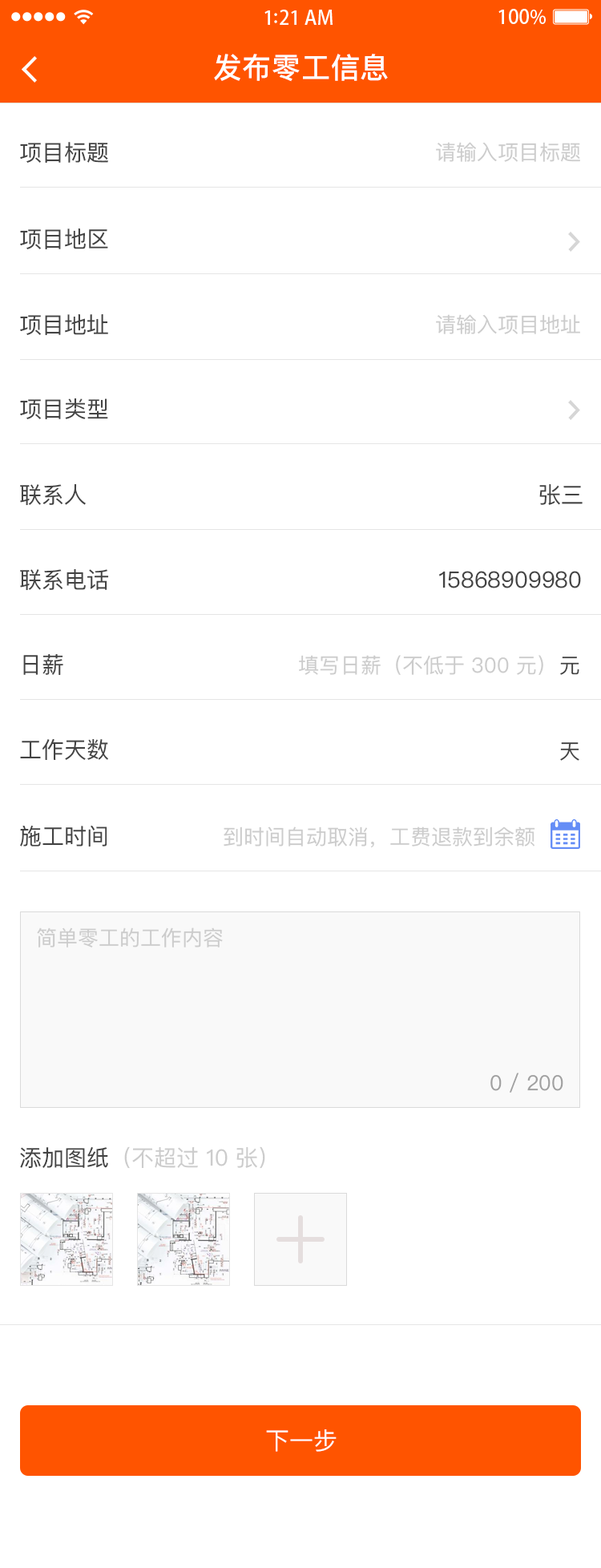
<style>
.page{position:relative;width:601px;height:1568px;background:#ffffff}
.page>*{position:absolute;margin:0}
.t1{font:28.9px "PingFangSC-Medium";letter-spacing:0.02em;color:#ffffff}
.t2{font:22.4px "PingFangSC-Regular";color:#434343}
.t3{font:20.8px "PingFangSC-Regular";color:#cccccc}
.t4{font:20.8px "PingFangSC-Regular";color:#434343}
.t5{font:20.8px "PingFangSC-Regular";color:#a0a0a0}
.t6{font:22.4px "PingFangSC-Regular";color:#cccccc}
.t7{font:24px "PingFangSC-Regular";color:#ffffff;text-transform:uppercase}
</style>
<div class="page">
<p class="t1" style="left:214px;top:54px;width:174px;height:28px">发布零工信息</p>
<p class="t2" style="left:20px;top:142px;width:88px;height:21px">项目标题</p>
<p class="t3" style="left:436px;top:142px;width:144px;height:20px">请输入项目标题</p>
<p class="t2" style="left:20px;top:228px;width:88px;height:21px">项目地区</p>
<p class="t2" style="left:20px;top:314px;width:88px;height:21px">项目地址</p>
<p class="t3" style="left:436px;top:314px;width:144px;height:20px">请输入项目地址</p>
<p class="t2" style="left:20px;top:398px;width:88px;height:21px">项目类型</p>
<p class="t2" style="left:20px;top:484px;width:66px;height:22px">联系人</p>
<p class="t2" style="left:540px;top:484px;width:43px;height:21px">张三</p>
<p class="t2" style="left:20px;top:569px;width:89px;height:22px">联系电话</p>
<p class="t2" style="left:439px;top:571px;width:142px;height:17px">15868909980</p>
<p class="t2" style="left:23px;top:654px;width:40px;height:21px">日薪</p>
<p class="t3" style="left:299px;top:655px;width:245px;height:20px">填写日薪（不低于 300 元）</p>
<p class="t4" style="left:560px;top:657px;width:20px;height:18px">元</p>
<p class="t2" style="left:20px;top:739px;width:88px;height:21px">工作天数</p>
<p class="t4" style="left:560px;top:742px;width:20px;height:19px">天</p>
<p class="t2" style="left:20px;top:825px;width:87px;height:22px">施工时间</p>
<p class="t3" style="left:224px;top:826px;width:311px;height:22px">到时间自动取消，工费退款到余额</p>
<p class="t3" style="left:37px;top:927px;width:186px;height:21px">简单零工的工作内容</p>
<p class="t5" style="left:491px;top:1073px;width:73px;height:20px">0 / 200</p>
<p class="t6" style="left:20px;top:1146px;width:245px;height:23px"><span class="t2">添加图纸</span>（不超过 10 张）</p>
<p class="t7" style="left:266px;top:1429px;width:71px;height:23px">下一步</p>
</div>
